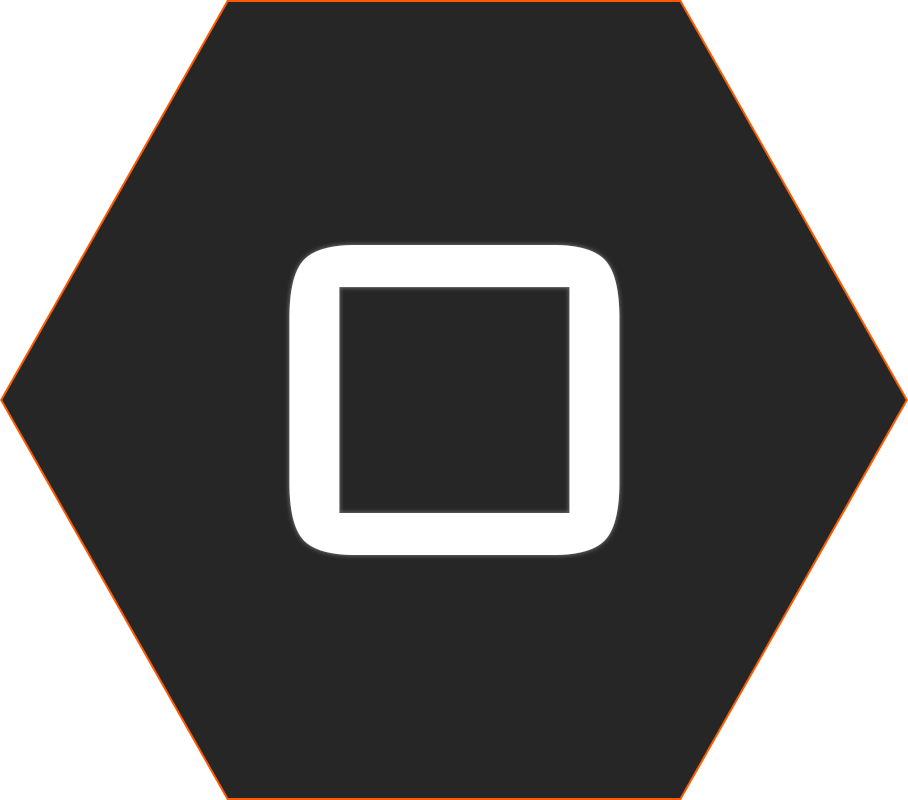
<style>
.page{position:relative;width:908px;height:800px;background:#262626}
.page>*{position:absolute;margin:0}
.t1{font:600px "BankGothicBT-Light";color:#ffffff}
</style>
<div class="page">
<p class="t1" style="left:289px;top:245px;width:331px;height:310px">0</p>
</div>
